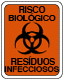
<style>
.page{position:relative;width:64px;height:80px}
.page>*{position:absolute;margin:0}
.t1{font:8px/8px "Helvetica-Bold";letter-spacing:-0.02em;color:#000000;scale:1.07 1}
.t2{font:9px/8px "Helvetica-Bold";color:#000000;scale:0.94 1}
.t3{font:9px/8px "Helvetica-Bold";letter-spacing:-0.02em;color:#000000;scale:0.96 1}
.t4{font:8px/7px "Helvetica-Bold";letter-spacing:-0.02em;color:#000000;text-transform:uppercase}
.t5{font:9px/7px "Helvetica-Bold";color:#000000;text-transform:uppercase;scale:0.94 1}
.t6{font:9px/7px "Helvetica-Bold";letter-spacing:-0.02em;color:#000000;text-transform:uppercase;scale:0.96 1}
.t7{font:10px/7px "Helvetica-Bold";letter-spacing:-0.02em;color:#000000;text-transform:uppercase;scale:0.96 1}
</style>
<div class="page">
<p class="t1" style="left:8px;top:6px;width:48px;height:15px;text-align:center"><span class="t2"> </span><span class="t3">RISCO<br></span> BIOLÓGICO</p>
<p class="t4" style="left:4px;top:56px;width:56px;height:17px;text-align:center"><span class="t5"> </span><span class="t6">R</span><span class="t7">e</span><span class="t6">síduos<br></span>infecciosos</p>
</div>
